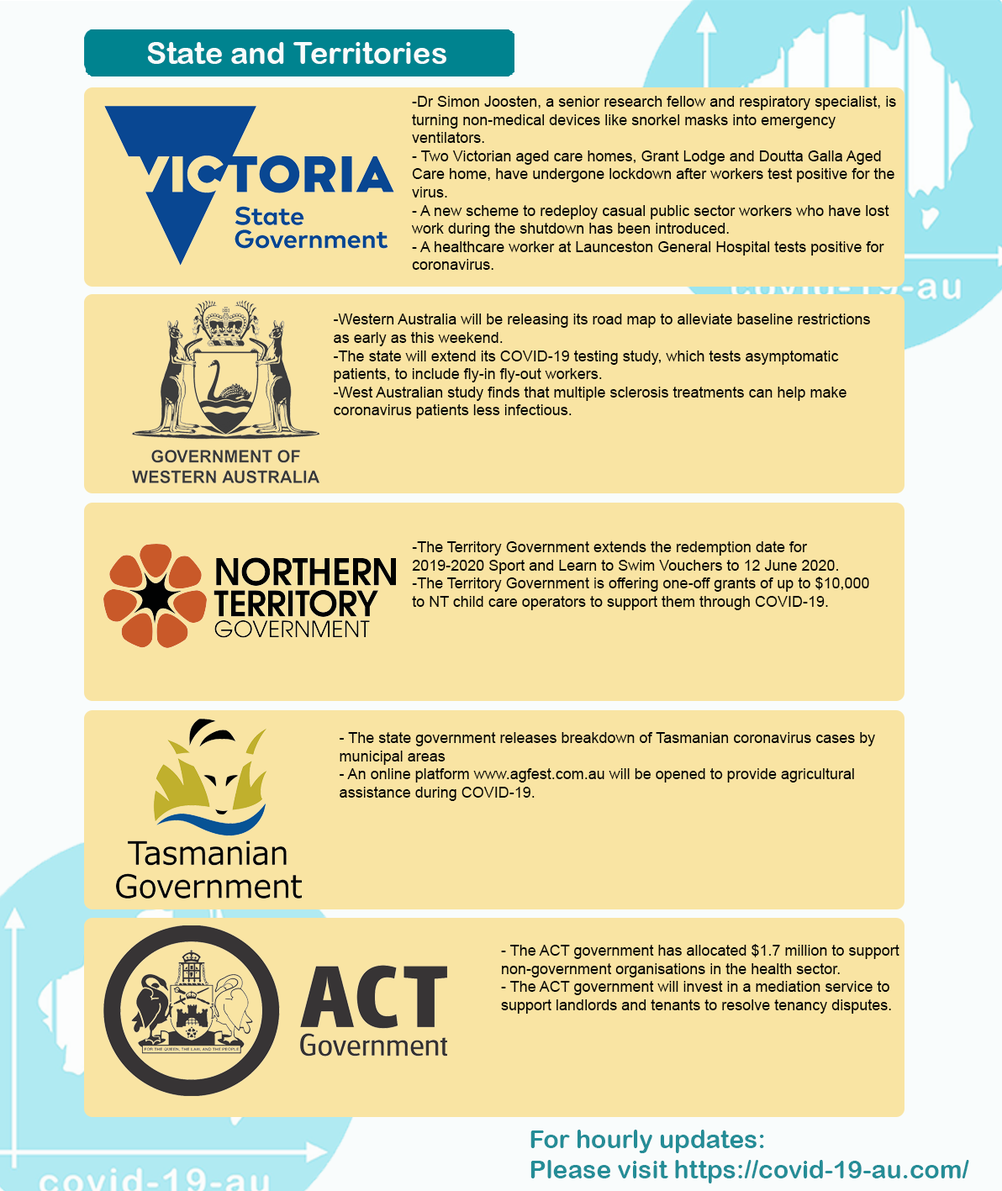
<style>
.page{position:relative;width:1002px;height:1191px;background:#f9e4a3}
.page>*{position:absolute;margin:0}
.t1{font:30.2px "ArialRoundedMTBold";color:#f8fbfb}
.t2{font:15.1px "ArialMT";color:#020202}
</style>
<div class="page">
<p class="t1" style="left:147px;top:42px;width:299px;height:22px">State and Territories</p>
<p class="t2" style="left:412px;top:96px;width:484px;height:174px">-Dr Simon Joosten, a senior research fellow and respiratory specialist, is turning non-medical devices like snorkel masks into emergency ventilators. <br>- Two Victorian aged care homes, Grant Lodge and Doutta Galla Aged Care home, have undergone lockdown after workers test positive for the virus. <br>- A new scheme to redeploy casual public sector workers who have lost work during the shutdown has been introduced. <br>- A healthcare worker at Launceston General Hospital tests positive for coronavirus.</p>
<p class="t2" style="left:334px;top:313px;width:536px;height:105px">-Western Australia will be releasing its road map to alleviate baseline restrictions as early as this weekend. <br>-The state will extend its COVID-19 testing study, which tests asymptomatic patients, to include fly-in fly-out workers. <br>-West Australian study finds that multiple sclerosis treatments can help make coronavirus patients less infectious.</p>
<p class="t2" style="left:412px;top:541px;width:457px;height:69px">-The Territory Government extends the redemption date for 2019-2020 Sport and Learn to Swim Vouchers to 12 June 2020. <br>-The Territory Government is offering one-off grants of up to $10,000 to NT child care operators to support them through COVID-19.</p>
<p class="t2" style="left:339px;top:732px;width:536px;height:69px">- The state government releases breakdown of Tasmanian coronavirus cases by municipal areas <br>- An online platform www.agfest.com.au will be opened to provide agricultural assistance during COVID-19.</p>
<p class="t2" style="left:501px;top:944px;width:398px;height:69px">- The ACT government has allocated $1.7 million to support non-government organisations in the health sector. <br>- The ACT government will invest in a mediation service to support landlords and tenants to resolve tenancy disputes.</p>
</div>
